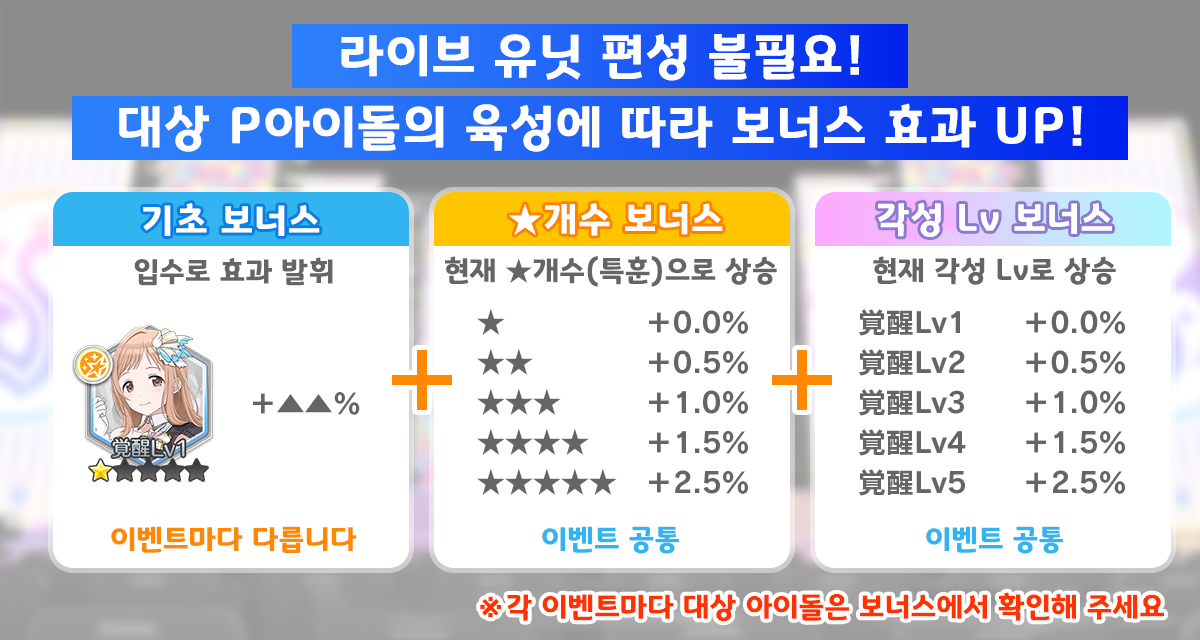
<style>
.page{position:relative;width:1200px;height:640px;background:#ffffff}
.page>*{position:absolute;margin:0}
.t1{font:50.7px "GyeonggiTitleB";letter-spacing:0.05em;color:#ffffff}
.t2{font:37.3px "GyeonggiTitleB";letter-spacing:0.05em;color:#ffffff}
.t3{font:29.3px "GyeonggiTitleB";letter-spacing:0.03em;color:#656565}
.t4{font:29.3px "GyeonggiTitleB";letter-spacing:0.03em;color:#fe8800}
.t5{font:29.3px "GyeonggiTitleB";letter-spacing:0.03em;color:#32b4f0}
.t6{font:29.3px "GyeonggiTitleB";letter-spacing:0.03em;color:#ff3202}
</style>
<div class="page">
<p class="t1" style="left:341px;top:33px;width:519px;height:48px">라이브 유닛 편성 불필요!</p>
<p class="t1" style="left:119px;top:103px;width:963px;height:49px">대상 P아이돌의 육성에 따라 보너스 효과 UP!</p>
<p class="t2" style="left:143px;top:203px;width:177px;height:33px">기초 보너스</p>
<p class="t2" style="left:509px;top:203px;width:214px;height:33px">★개수 보너스</p>
<p class="t2" style="left:877px;top:202px;width:235px;height:35px">각성 Lv 보너스</p>
<p class="t3" style="left:134px;top:257px;width:199px;height:29px">입수로 효과 발휘</p>
<p class="t3" style="left:445px;top:256px;width:332px;height:31px">현재 ★개수(특훈)으로 상승</p>
<p class="t3" style="left:873px;top:256px;width:243px;height:29px">현재 각성 Lv로 상승</p>
<p class="t4" style="left:111px;top:526px;width:246px;height:27px">이벤트마다 다릅니다</p>
<p class="t5" style="left:542px;top:526px;width:137px;height:28px">이벤트 공통</p>
<p class="t5" style="left:926px;top:526px;width:137px;height:28px">이벤트 공통</p>
<p class="t6" style="left:480px;top:592px;width:684px;height:30px">※ 각 이벤트마다 대상 아이돌은 보너스에서 확인해 주세요</p>
</div>
